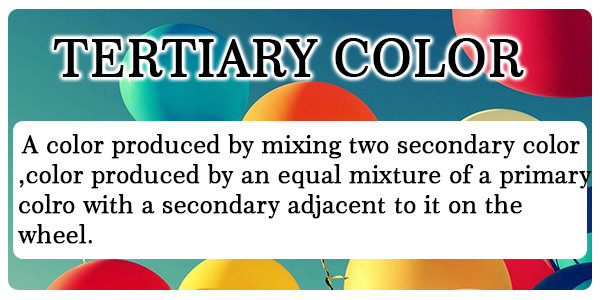
<style>
.page{position:relative;width:600px;height:300px;background:#ffffff}
.page>*{position:absolute;margin:0}
.t1{font:51.5px "Century751BT-RomanNo2B";color:#000000;font-weight:bold}
.t2{font:25px "Century751BT-RomanNo2B";color:#000000;font-weight:bold}
</style>
<div class="page">
<p class="t1" style="left:53px;top:38px;width:471px;height:39px">TERTIARY COLOR</p>
<p class="t2" style="left:18px;top:134px;width:574px;height:110px">A color produced by mixing two secondary color<br>,color produced by an equal mixture of a primary colro with a secondary adjacent to it on the wheel.</p>
</div>
